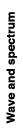
<style>
.page{position:relative;width:23px;height:133px;background:#ffffff}
.page>*{position:absolute;margin:0}
.t1{font:11.2px "Helvetica-Bold";color:#000000;scale:1.06 1}
</style>
<div class="page">
<p class="t1" style="left:6px;top:12px;width:11px;height:112px;rotate:-90deg">Wave and spectrum</p>
</div>
